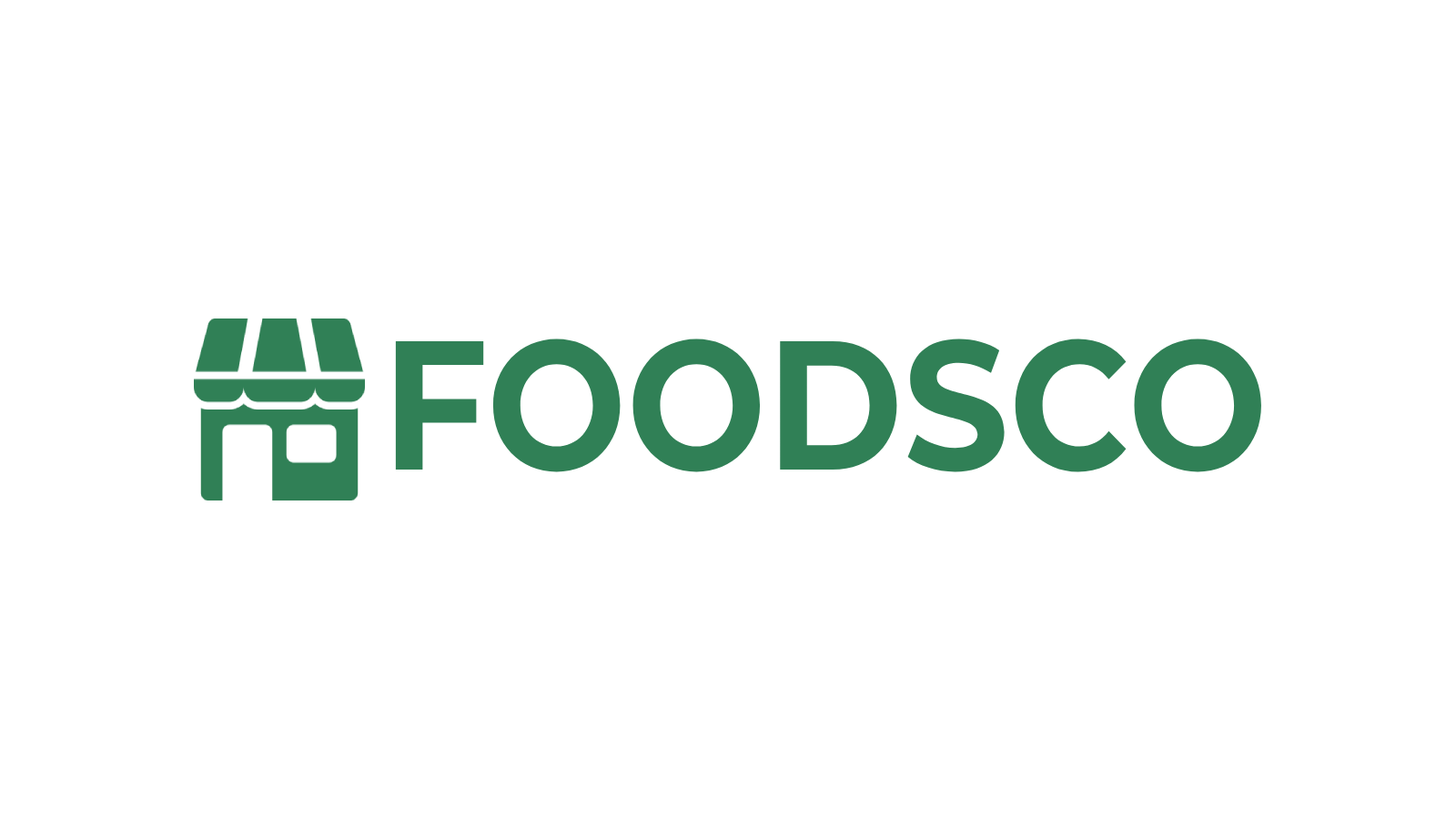
<style>
.page{position:relative;width:1456px;height:819px;background:#ffffff}
.page>*{position:absolute;margin:0}
.t1{font:183.5px "Montserrat-Bold";color:#308056;scale:0.9 1}
</style>
<div class="page">
<p class="t1" style="left:395px;top:339px;width:866px;height:133px">FOODSCO</p>
</div>
